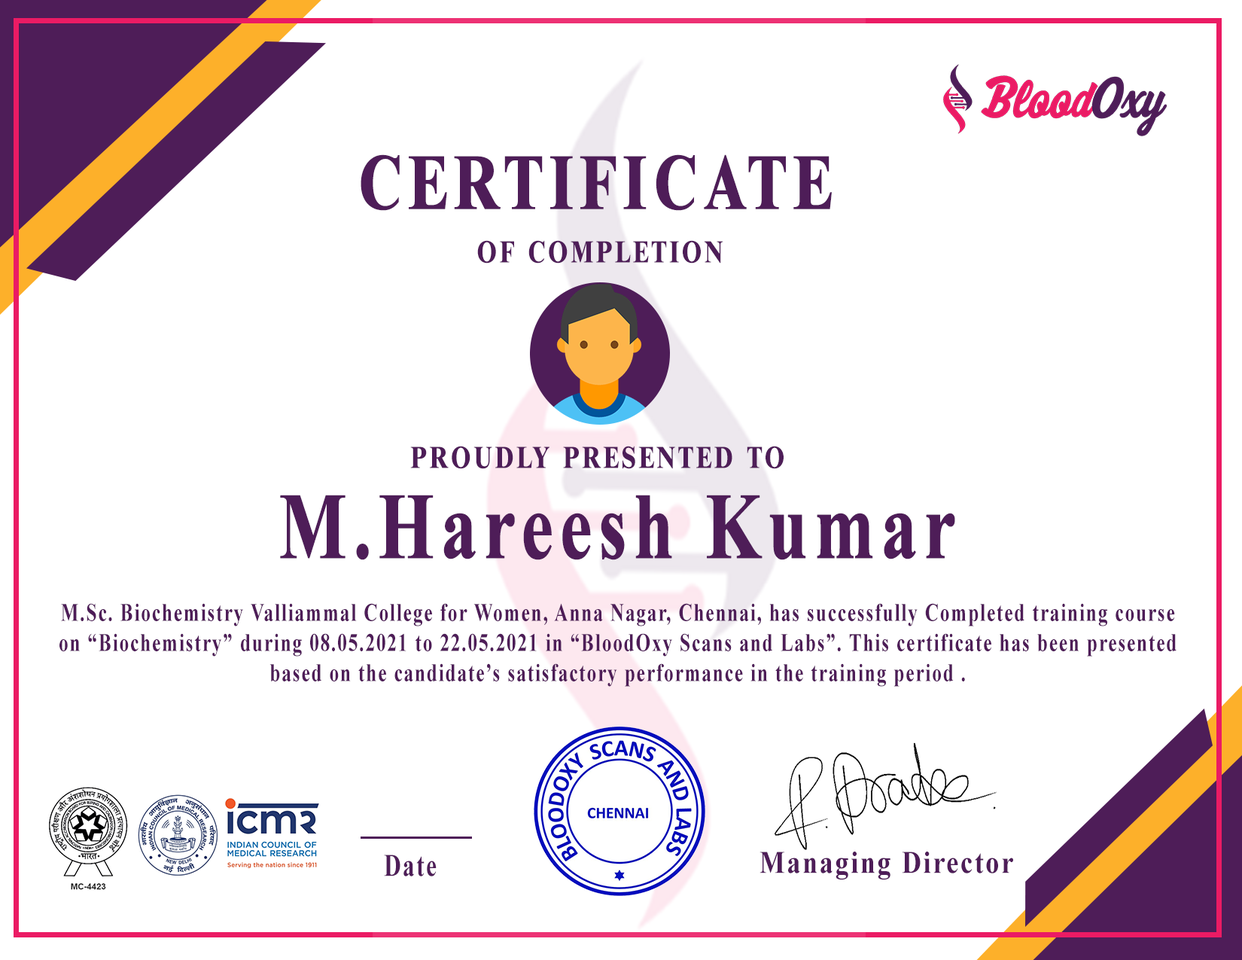
<style>
.page{position:relative;width:1242px;height:960px;background:#ffffff}
.page>*{position:absolute;margin:0}
.t1{font:109.8px "TimesNewRomanPS-BoldMT";letter-spacing:0.075em;color:#4e1d58;font-variant:small-caps;scale:0.76 1}
.t2{font:43.9px "TimesNewRomanPS-BoldMT";letter-spacing:0.075em;color:#4e1d58;font-variant:small-caps;scale:0.76 1}
.t3{font:94.1px "TimesNewRomanPS-BoldMT";letter-spacing:0.075em;color:#4e1d58;font-weight:bold;scale:0.76 1}
.t4{font:25.1px "TimesNewRomanPS-BoldMT";letter-spacing:0.075em;color:#4e1d58;scale:0.76 1}
.t5{font:31.4px "TimesNewRomanPS-BoldMT";letter-spacing:0.075em;color:#4e1d58;scale:0.76 1}
.t6{font:31.4px "TimesNewRomanPS-BoldMT";letter-spacing:0.075em;color:#4e1d58;scale:0.86 1}
</style>
<div class="page">
<p class="t1" style="left:361px;top:154px;width:471px;height:57px">certificate</p>
<p class="t2" style="left:477px;top:240px;width:247px;height:24px">of completion</p>
<p class="t2" style="left:410px;top:446px;width:374px;height:23px">proudly presented to</p>
<p class="t3" style="left:280px;top:495px;width:675px;height:65px">M.Hareesh Kumar</p>
<p class="t4" style="left:59px;top:603px;width:1118px;height:84px;text-align:center">M.Sc. Biochemistry Valliammal College for Women, Anna Nagar, Chennai, has successfully Completed training course on “Biochemistry” during 08.05.2021 to 22.05.2021 in “BloodOxy Scans and Labs”. This certificate has been presented based on the candidate’s satisfactory performance in the training period .</p>
<p class="t5" style="left:384px;top:855px;width:53px;height:21px">Date</p>
<p class="t6" style="left:760px;top:851px;width:253px;height:29px">Managing Director</p>
</div>
